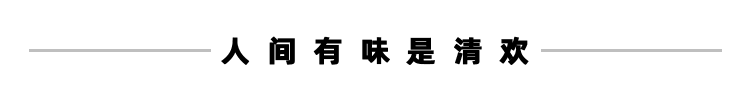
<style>
.page{position:relative;width:750px;height:100px;background:#ffffff}
.page>*{position:absolute;margin:0}
.t1{font:30px "AlibabaPuHuiTiB";letter-spacing:0.54em;color:#000000;font-weight:bold}
</style>
<div class="page">
<p class="t1" style="left:221px;top:36px;width:308px;height:29px">人间有味是清欢</p>
</div>
